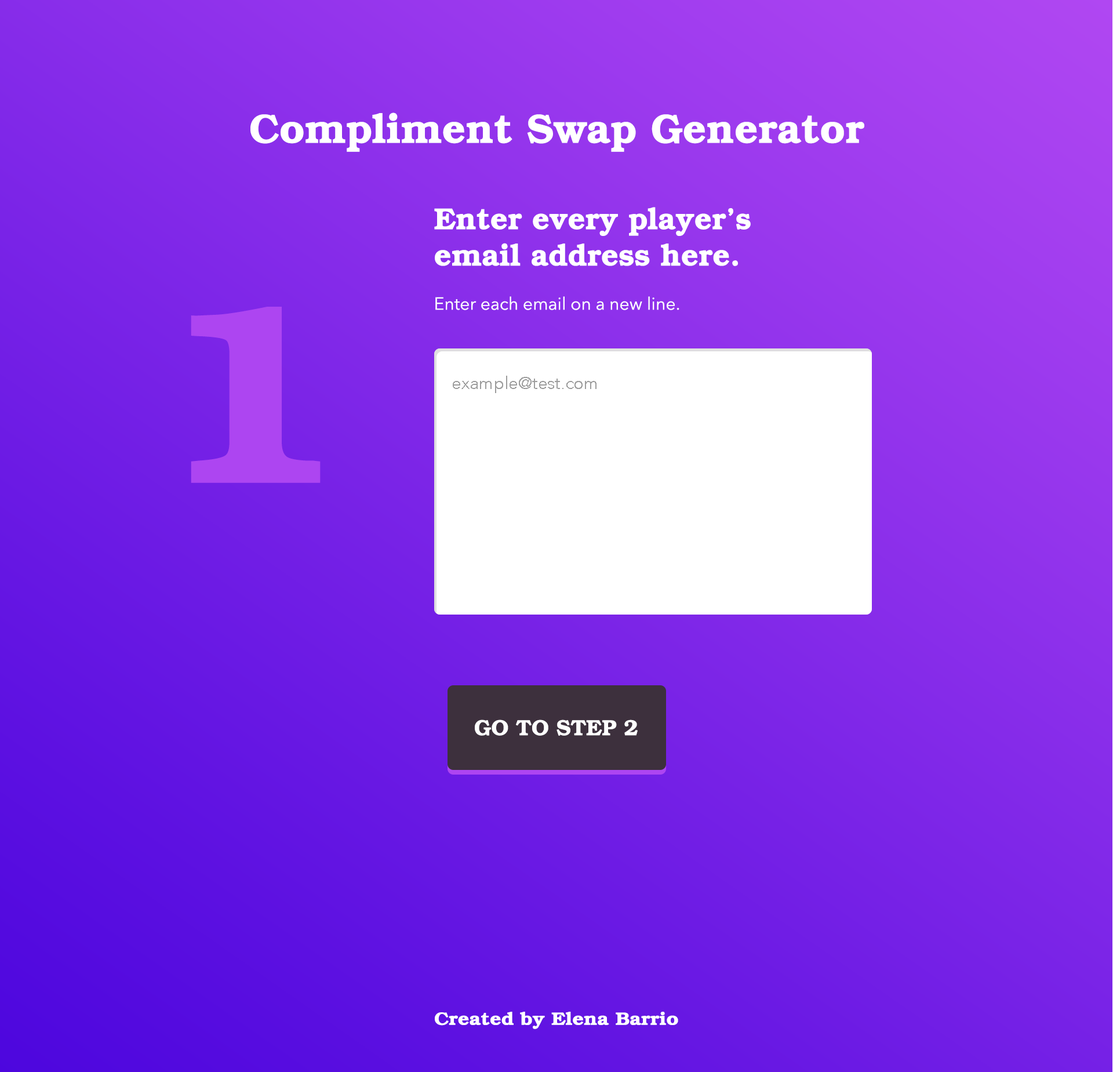
<style>
.page{position:relative;width:1113px;height:1072px}
.page>*{position:absolute;margin:0}
.t1{font:41.1px "URWBookmanL-DemiBold";color:#ffffff}
.t2{font:30.3px "URWBookmanL-DemiBold";color:#ffffff}
.t3{font:17.4px "AvenirNext-Regular";color:#ffffff}
.t4{font:258.2px "URWBookmanL-DemiBold";color:#ad45f1;scale:1.16 1}
.t5{font:17.4px "Avenir-Light";color:#9d9d9d}
.t6{font:21.9px "URWBookmanL-DemiBold";color:#ffffff}
.t7{font:18px "URWBookmanL-DemiBold";color:#ffffff;scale:1.1 1}
</style>
<div class="page">
<p class="t1" style="left:250px;top:112px;width:615px;height:40px">Compliment Swap Generator</p>
<p class="t2" style="left:434px;top:207px;width:317px;height:59px">Enter every player’s email address here.</p>
<p class="t3" style="left:435px;top:296px;width:244px;height:14px">Enter each email on a new line.</p>
<p class="t4" style="left:191px;top:307px;width:129px;height:176px">1</p>
<p class="t5" style="left:453px;top:376px;width:143px;height:17px">example@test.com</p>
<p class="t6" style="left:475px;top:719px;width:163px;height:16px">GO TO STEP 2</p>
<p class="t7" style="left:435px;top:1011px;width:243px;height:18px">Created by Elena Barrio</p>
</div>
